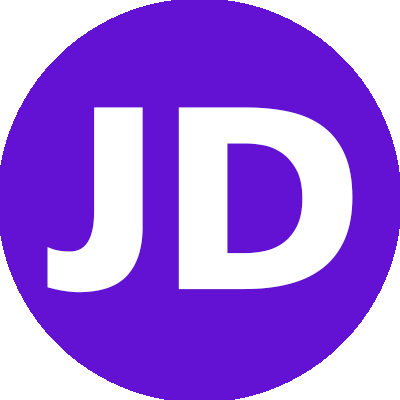
<style>
.page{position:relative;width:400px;height:400px;background:#6311d3}
.page>*{position:absolute;margin:0}
.t1{font:260px "ArticulateExtrabold";letter-spacing:0.01em;color:#ffffff}
</style>
<div class="page">
<p class="t1" style="left:47px;top:107px;width:306px;height:186px">JD</p>
</div>
